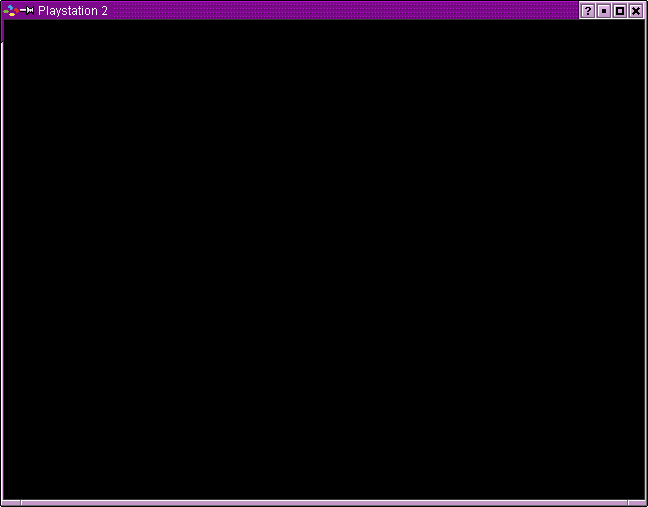
<style>
.page{position:relative;width:648px;height:507px;background:#000000}
.page>*{position:absolute;margin:0}
.t1{font:12px "ArialMT";color:#ffffff}
</style>
<div class="page">
<p class="t1" style="left:39px;top:6px;width:68px;height:11px">Playstation 2</p>
</div>
